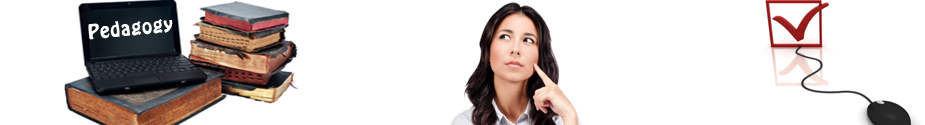
<style>
.page{position:relative;width:925px;height:125px;background:#ffffff}
.page>*{position:absolute;margin:0}
.t1{font:18px "HoboStd";letter-spacing:0.05em;color:#ffffff}
</style>
<div class="page">
<p class="t1" style="left:88px;top:19px;width:85px;height:21px;rotate:-5deg">Pedagogy</p>
</div>
